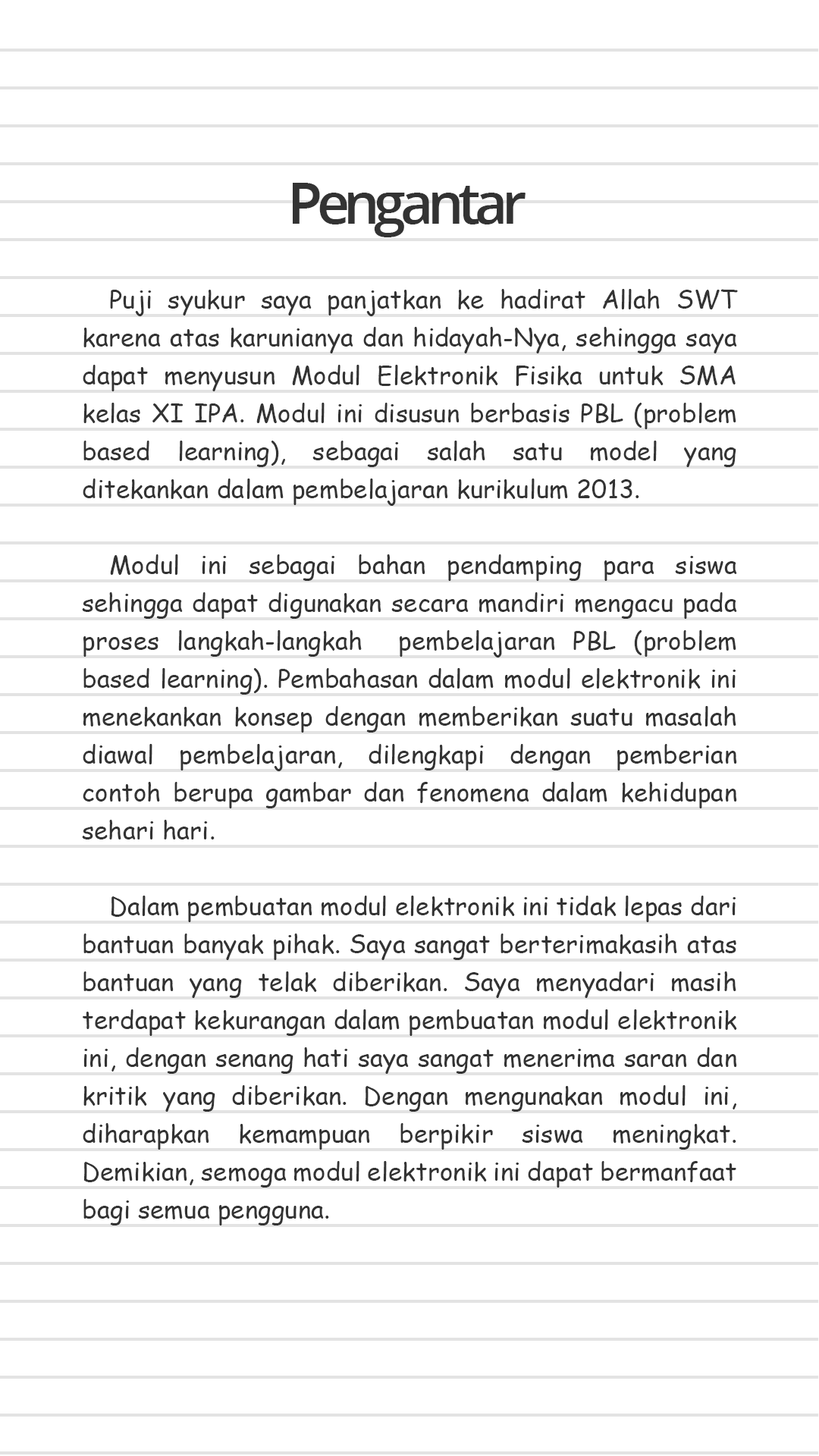
<style>
.page{position:relative;width:819px;height:1456px;background:#ffffff}
.page>*{position:absolute;margin:0}
.t1{font:56.9px "OpenSans-SemiBold";letter-spacing:-0.1em;color:#333333}
.t2{font:25.3px/37.9px "ComicSansMS";color:#333333}
</style>
<div class="page">
<p class="t1" style="left:293px;top:183px;width:233px;height:54px">Pengantar</p>
<p class="t2" style="left:82px;top:289px;width:656px;height:936px;text-align:justify">Puji syukur saya panjatkan ke hadirat Allah SWT karena atas karunianya dan hidayah-Nya, sehingga saya dapat menyusun Modul Elektronik Fisika untuk SMA kelas XI IPA. Modul ini disusun berbasis PBL (problem based learning), sebagai salah satu model yang ditekankan dalam pembelajaran kurikulum 2013.<br><br> Modul ini sebagai bahan pendamping para siswa sehingga dapat digunakan secara mandiri mengacu pada proses langkah-langkah  pembelajaran PBL (problem based learning). Pembahasan dalam modul elektronik ini menekankan konsep dengan memberikan suatu masalah diawal pembelajaran, dilengkapi dengan pemberian contoh berupa gambar dan fenomena dalam kehidupan sehari hari. <br><br> Dalam pembuatan modul elektronik ini tidak lepas dari bantuan banyak pihak. Saya sangat berterimakasih atas bantuan yang telak diberikan. Saya menyadari masih terdapat kekurangan dalam pembuatan modul elektronik ini, dengan senang hati saya sangat menerima saran dan kritik yang diberikan. Dengan mengunakan modul ini, diharapkan kemampuan berpikir siswa meningkat. Demikian, semoga modul elektronik ini dapat bermanfaat bagi semua pengguna.</p>
</div>
